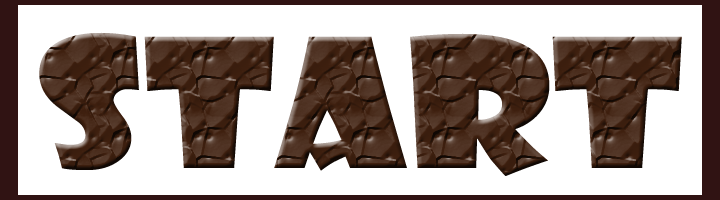
<style>
.page{position:relative;width:720px;height:200px;background:#ffffff}
.page>*{position:absolute;margin:0}
.t1{font:175.2px "ShowcardGothic-Reg";color:#3f200f;scale:1.21 1}
</style>
<div class="page">
<p class="t1" style="left:39px;top:32px;width:643px;height:144px">Start</p>
</div>
